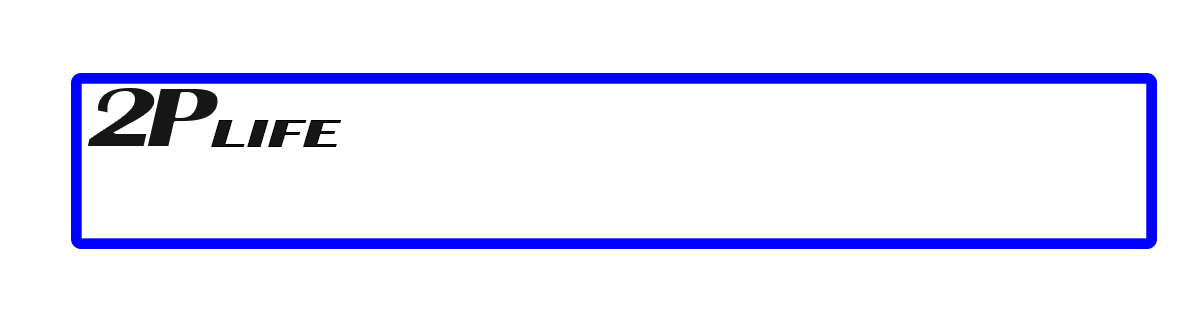
<style>
.page{position:relative;width:1188px;height:322px;background:#ffffff}
.page>*{position:absolute;margin:0}
.t1{font:89.4px "BritannicBold";letter-spacing:-0.1em;color:#161616;font-variant:small-caps;font-style:italic;scale:1.3 1}
.t2{font:41.4px "BritannicBold";color:#161616;font-variant:small-caps;font-style:italic;scale:1.68 1}
</style>
<div class="page">
<p class="t1" style="left:86px;top:87px;width:133px;height:60px">2P</p>
<p class="t2" style="left:211px;top:120px;width:131px;height:27px">LIFE</p>
</div>
